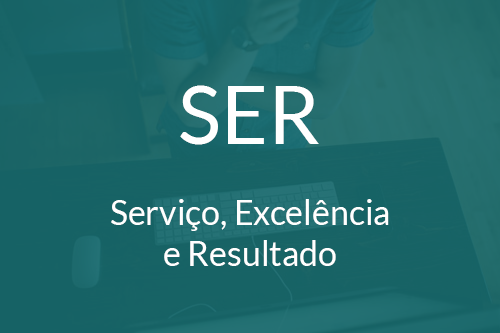
<style>
.page{position:relative;width:500px;height:333px}
.page>*{position:absolute;margin:0}
.t1{font:81.4px "Lato-Regular";color:#ffffff}
.t2{font:34px "Lato-Regular";color:#ffffff}
</style>
<div class="page">
<p class="t1" style="left:180px;top:85px;width:139px;height:60px">SER</p>
<p class="t2" style="left:111px;top:199px;width:278px;height:67px;text-align:center">Serviço, Excelência<br>e Resultado</p>
</div>
